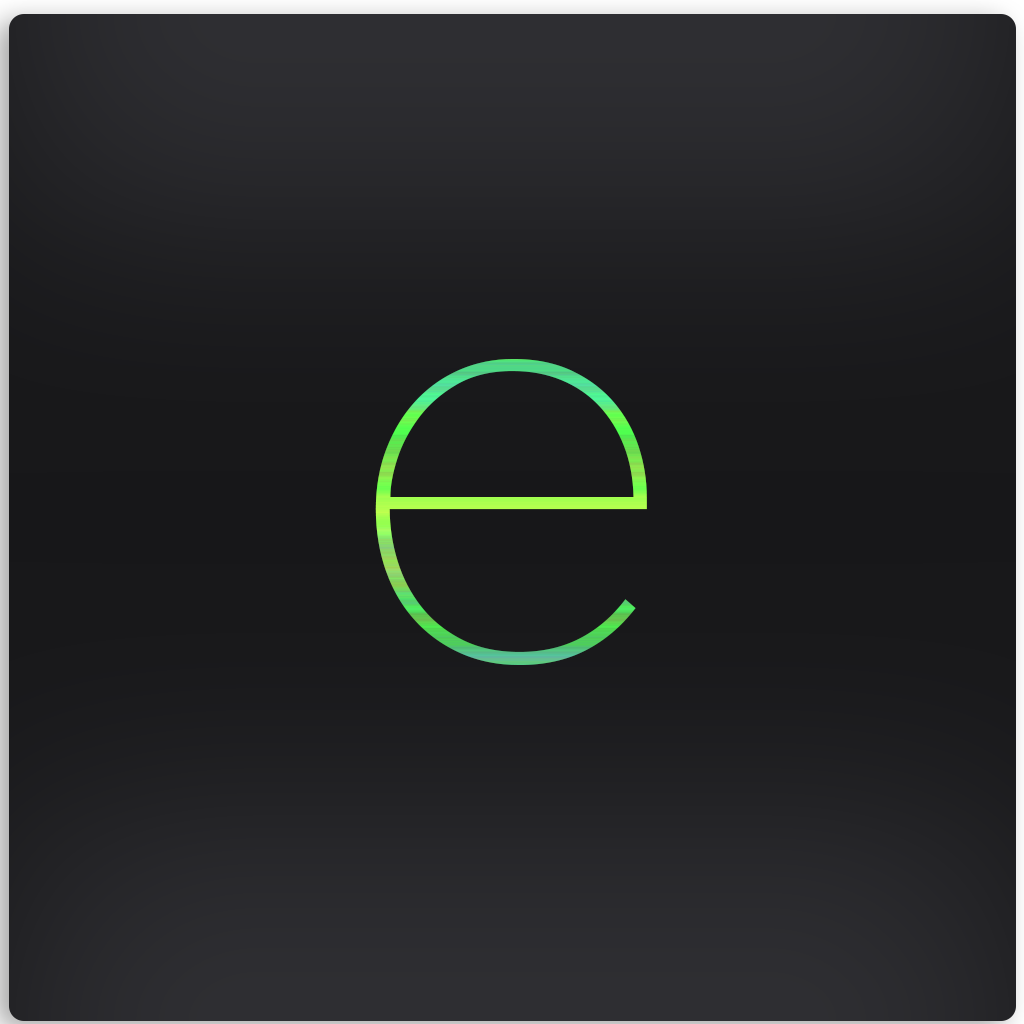
<style>
.page{position:relative;width:1024px;height:1024px}
.page>*{position:absolute;margin:0}
.t1{font:626.8px "AvenirNext-UltraLight"}
</style>
<div class="page">
<p class="t1" style="left:375px;top:359px;width:272px;height:306px">e</p>
</div>
